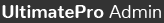
<style>
.page{position:relative;width:164px;height:23px;background:#333333}
.page>*{position:absolute;margin:0}
.t1{font:18px "Nunito-ExtraBold";color:#ffffff}
.t2{font:18px "Nunito-Light";color:#ffffff}
</style>
<div class="page">
<p class="t1" style="left:2px;top:5px;width:159px;height:13px">UltimatePro <span class="t2">Admin</span></p>
</div>
